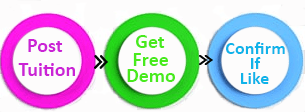
<style>
.page{position:relative;width:305px;height:112px;background:#fdfcfc}
.page>*{position:absolute;margin:0}
.t1{font:12px "Calibri-Bold";color:#cb23d6}
.t2{font:12px "Calibri-Bold";color:#48ea1c}
.t3{font:18.3px "Calibri-Bold";color:#10b3e9}
</style>
<div class="page">
<p class="t1" style="left:18px;top:39px;width:57px;height:37px;text-align:right">Post<br>         Tuition</p>
<p class="t2" style="left:136px;top:35px;width:29px;height:13px">Get</p>
<p class="t2" style="left:133px;top:53px;width:35px;height:13px">Free</p>
<p class="t3" style="left:226px;top:42px;width:59px;height:12px">Confirm</p>
<p class="t3" style="left:251px;top:57px;width:10px;height:12px">If</p>
<p class="t2" style="left:127px;top:69px;width:48px;height:13px">Demo</p>
<p class="t3" style="left:241px;top:72px;width:28px;height:12px">Like</p>
</div>
